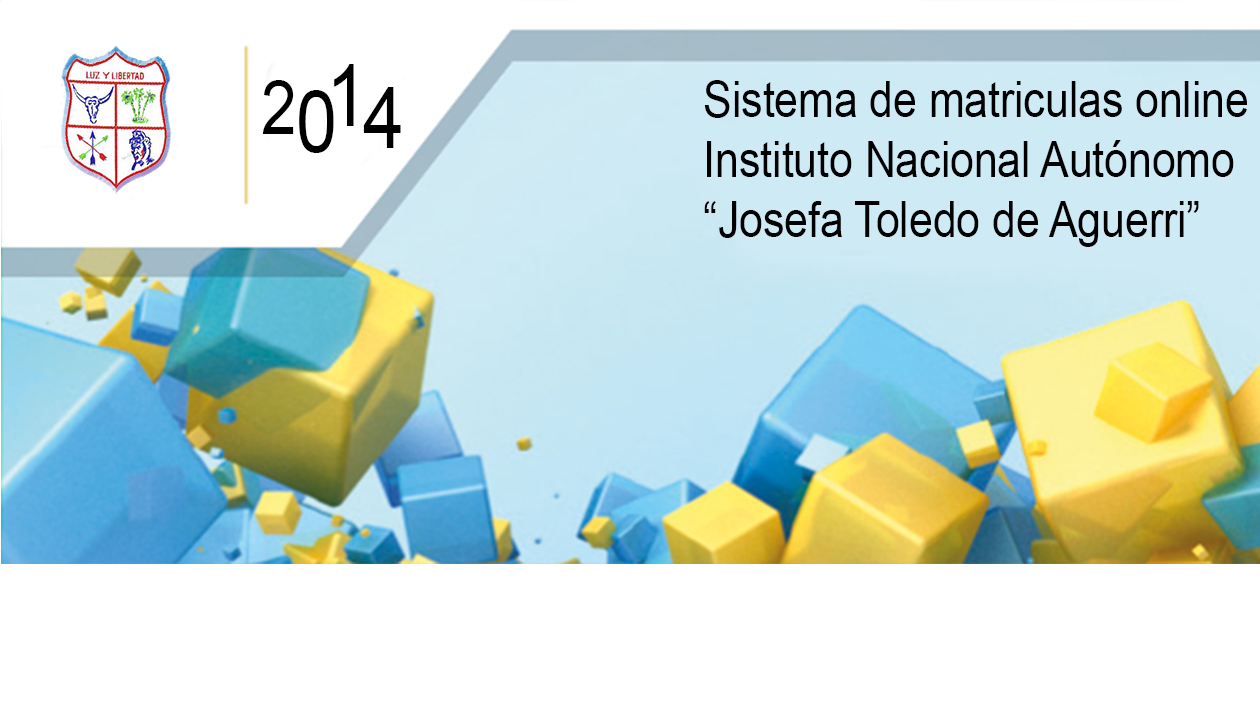
<style>
.page{position:relative;width:1260px;height:720px;background:#ffffff}
.page>*{position:absolute;margin:0}
.t1{font:20.7px "ArialMT";color:#000000;scale:0.85 1}
.t2{font:17.9px "ArialMT";color:#000000;scale:0.85 1}
.t3{font:12px "ArialMT";color:#000000;scale:0.85 1}
</style>
<div class="page">
<p class="t1" style="left:334px;top:64px;width:20px;height:62px">1</p>
<p class="t2" style="left:263px;top:80px;width:31px;height:54px">2</p>
<p class="t1" style="left:363px;top:87px;width:38px;height:61px">4</p>
<p class="t3" style="left:704px;top:80px;width:543px;height:167px">Sistema de matriculas online<br>Instituto Nacional Autónomo<br>“Josefa Toledo de Aguerri”</p>
<p class="t1" style="left:299px;top:90px;width:35px;height:63px">0</p>
</div>
